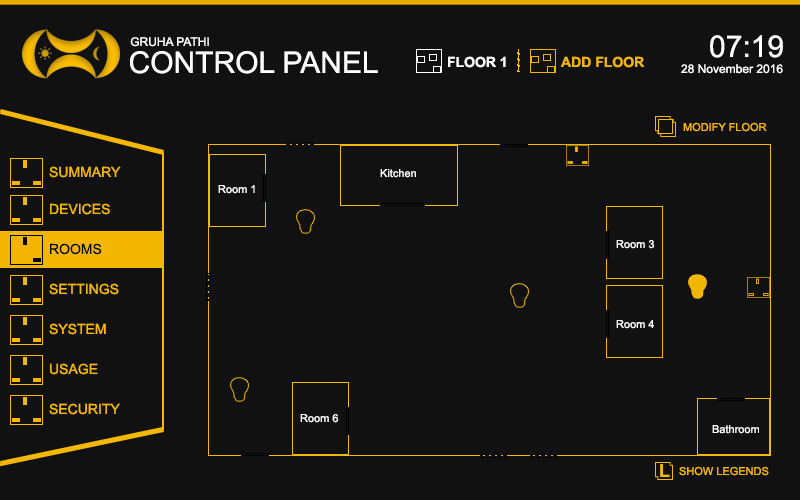
<style>
.page{position:relative;width:800px;height:500px;background:#111111}
.page>*{position:absolute;margin:0}
.t1{font:12px "ArialMT";color:#ffffff}
.t2{font:30px "ArialMT";color:#ffffff}
.t3{font:14px "Arial-BoldMT";color:#ffffff}
.t4{font:14px "Arial-BoldMT";color:#f1b500}
.t5{font:11px "ArialMT";color:#f5b800}
.t6{font:14px "ArialMT";color:#f2b600}
.t7{font:11px "ArialMT";color:#ffffff}
.t8{font:14px "ArialMT";color:#f5b800}
.t9{font:14px "ArialMT";color:#000000}
.t10{font:18px "Arial-BoldMT";color:#f5b800}
</style>
<div class="page">
<p class="t1" style="left:130px;top:37px;width:79px;height:10px">GRUHA PATHI</p>
<p class="t2" style="left:710px;top:35px;width:73px;height:23px">07:19</p>
<p class="t2" style="left:130px;top:51px;width:248px;height:23px">CONTROL PANEL</p>
<p class="t3" style="left:448px;top:56px;width:58px;height:12px">FLOOR 1</p>
<p class="t4" style="left:561px;top:56px;width:84px;height:12px">ADD FLOOR</p>
<p class="t1" style="left:681px;top:64px;width:102px;height:10px">28 November 2016</p>
<p class="t5" style="left:683px;top:122px;width:84px;height:10px">MODIFY FLOOR</p>
<p class="t6" style="left:49px;top:166px;width:72px;height:12px">SUMMARY</p>
<p class="t7" style="left:380px;top:169px;width:36px;height:9px">Kitchen</p>
<p class="t7" style="left:218px;top:185px;width:37px;height:9px">Room 1</p>
<p class="t8" style="left:50px;top:203px;width:60px;height:12px">DEVICES</p>
<p class="t9" style="left:50px;top:243px;width:52px;height:12px">ROOMS</p>
<p class="t7" style="left:616px;top:240px;width:39px;height:9px">Room 3</p>
<p class="t8" style="left:49px;top:283px;width:70px;height:12px">SETTINGS</p>
<p class="t8" style="left:49px;top:323px;width:57px;height:12px">SYSTEM</p>
<p class="t7" style="left:616px;top:320px;width:38px;height:9px">Room 4</p>
<p class="t8" style="left:50px;top:363px;width:48px;height:12px">USAGE</p>
<p class="t8" style="left:49px;top:403px;width:71px;height:12px">SECURITY</p>
<p class="t7" style="left:300px;top:414px;width:39px;height:9px">Room 6</p>
<p class="t7" style="left:712px;top:425px;width:47px;height:9px">Bathroom</p>
<p class="t10" style="left:660px;top:464px;width:10px;height:13px">L</p>
<p class="t5" style="left:679px;top:466px;width:90px;height:10px">SHOW LEGENDS</p>
</div>
